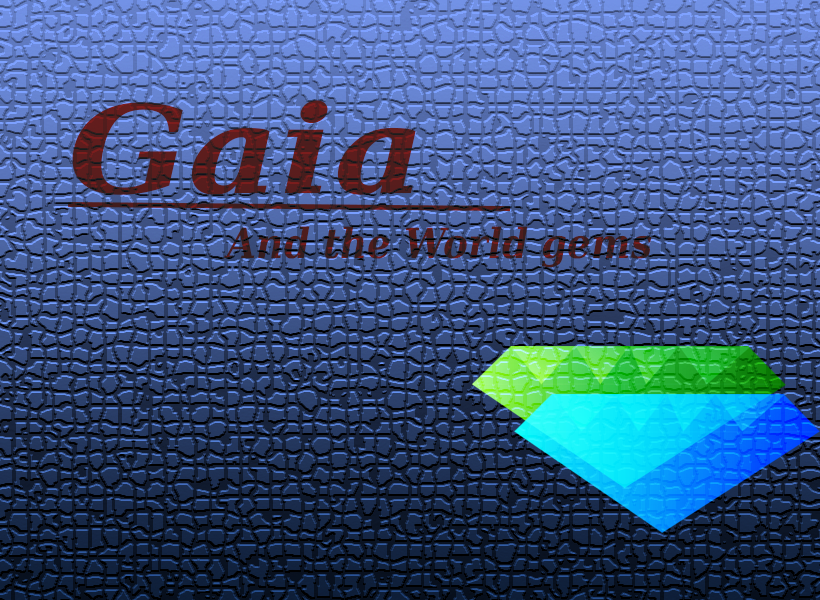
<style>
.page{position:relative;width:820px;height:600px}
.page>*{position:absolute;margin:0}
.t1{font:122.4px "DejaVuSerifCondensed-BoldItalic";color:#571d1d;scale:1.28 1}
.t2{font:41.6px "DejaVuSerifCondensed-BoldItalic";color:#481d1d}
</style>
<div class="page">
<p class="t1" style="left:72px;top:100px;width:344px;height:95px">Gaia</p>
<p class="t2" style="left:224px;top:226px;width:428px;height:42px">And the World gems</p>
</div>
